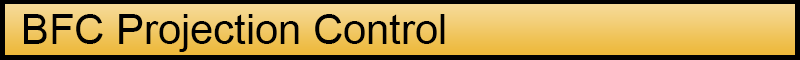
<style>
.page{position:relative;width:800px;height:60px;background:#000000}
.page>*{position:absolute;margin:0}
.t1{font:41.7px "ArialMT";color:#000000}
</style>
<div class="page">
<p class="t1" style="left:24px;top:14px;width:421px;height:38px">BFC Projection Control</p>
</div>
